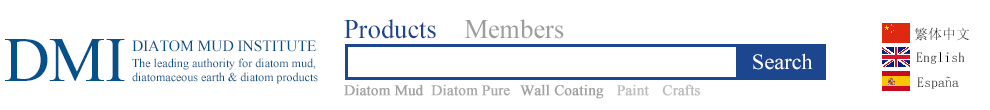
<style>
.page{position:relative;width:990px;height:110px;background:#ffffff}
.page>*{position:absolute;margin:0}
.t1{font:26.7px "TimesNewRomanPSMT";color:#1c468e}
.t2{font:26.7px "TimesNewRomanPSMT";color:#9d9d9e}
.t3{font:14px "SimSun"}
.t4{font:63.2px "TimesNewRomanPSMT";color:#04518c;text-transform:uppercase}
.t5{font:15.8px "TimesNewRomanPSMT";color:#04518c;text-transform:uppercase}
.t6{font:21.9px "TimesNewRomanPSMT";color:#ffffff}
.t7{font:14px "SimSun";color:#000000}
.t8{font:12px/14px "TimesNewRomanPSMT";color:#04518c}
.t9{font:14.8px "TimesNewRomanPSMT";color:#a2a2a2;font-weight:bold}
.t10{font:14.8px "TimesNewRomanPSMT";color:#a9abac;font-weight:bold}
.t11{font:14.8px "TimesNewRomanPSMT";color:#bdbdbd;font-weight:bold}
</style>
<div class="page">
<p class="t1" style="left:344px;top:19px;width:92px;height:20px">Products</p>
<p class="t2" style="left:464px;top:19px;width:100px;height:20px">Members</p>
<p class="t3" style="left:914px;top:27px;width:56px;height:14px">繁体中文</p>
<p class="t4" style="left:5px;top:39px;width:120px;height:42px">dmi</p>
<p class="t5" style="left:132px;top:40px;width:184px;height:12px">DIATOM MUD INSTItUTE</p>
<p class="t6" style="left:753px;top:53px;width:60px;height:17px">Search</p>
<p class="t7" style="left:916px;top:52px;width:49px;height:12px">English</p>
<p class="t8" style="left:132px;top:58px;width:186px;height:26px">The leading authority for diatom mud,<br>diatomaceous earth &amp; diatom products</p>
<p class="t3" style="left:917px;top:76px;width:42px;height:13px">España</p>
<p class="t9" style="left:344px;top:84px;width:80px;height:12px">Diatom Mud</p>
<p class="t10" style="left:431px;top:84px;width:79px;height:12px">Diatom Pure</p>
<p class="t9" style="left:520px;top:84px;width:84px;height:15px">Wall Coating</p>
<p class="t11" style="left:616px;top:84px;width:33px;height:12px">Paint</p>
<p class="t11" style="left:662px;top:84px;width:38px;height:12px">Crafts</p>
</div>
